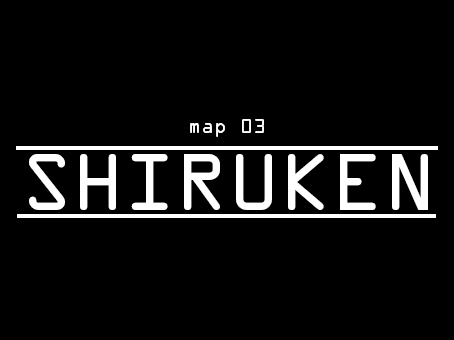
<style>
.page{position:relative;width:454px;height:340px;background:#000000}
.page>*{position:absolute;margin:0}
.t1{font:18px "OCRAStd";color:#ffffff}
.t2{font:14px "OCRAStd";color:#ffffff}
.t3{font:72px "OCRAStd";color:#ffffff}
</style>
<div class="page">
<p class="t1" style="left:190px;top:119px;width:74px;height:18px"><span class="t2"><br><br><br><br><br><br><br></span>map 03</p>
<p class="t3" style="left:29px;top:154px;width:399px;height:56px">SHIRUKEN</p>
</div>
